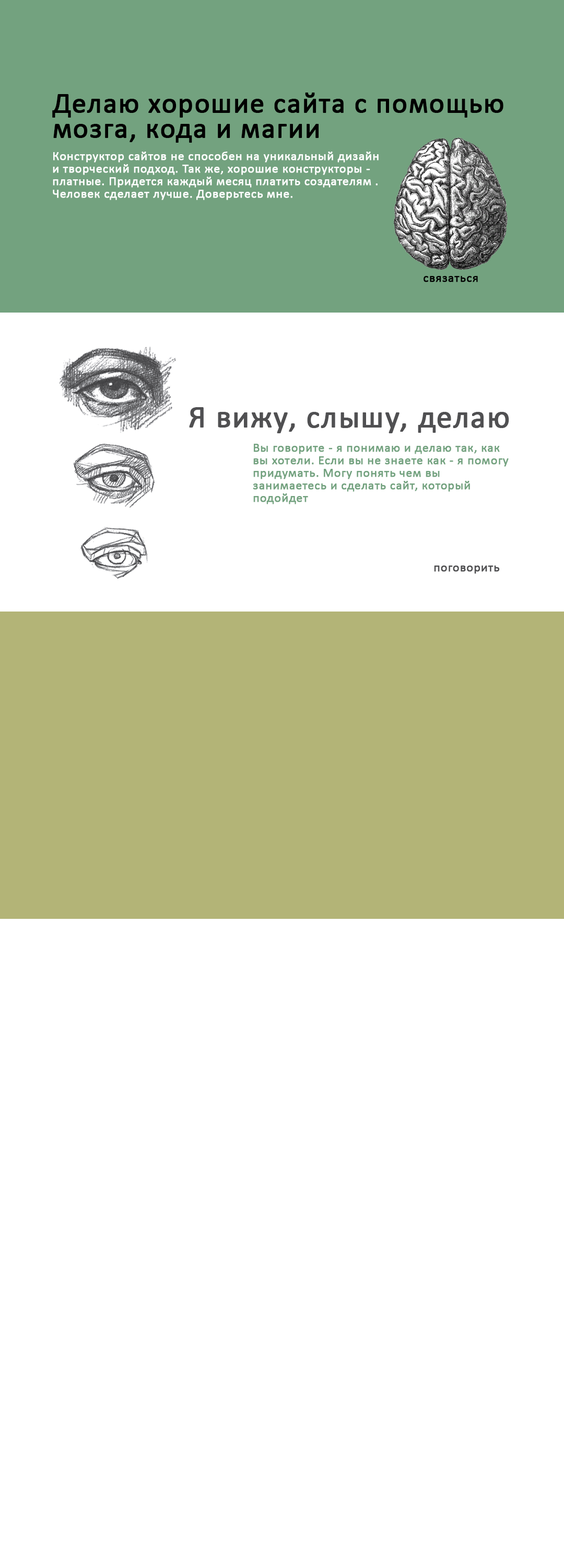
<style>
.page{position:relative;width:564px;height:1568px;background:#ffffff}
.page>*{position:absolute;margin:0}
.t1{font:28.7px/25.1px "Calibri";letter-spacing:0.02em;color:#000000;font-weight:bold}
.t2{font:12.5px/12.5px "Calibri";letter-spacing:0.02em;color:#ffffff;font-weight:bold}
.t3{font:12.5px "Calibri";letter-spacing:0.02em;color:#000000;font-weight:bold}
.t4{font:31.4px "Calibri";letter-spacing:0.02em;color:#505052;font-weight:bold}
.t5{font:12.5px/12.5px "Calibri";letter-spacing:0.02em;color:#73a27f;font-weight:bold}
.t6{font:12.5px "Calibri";letter-spacing:0.02em;color:#505052;font-weight:bold}
</style>
<div class="page">
<p class="t1" style="left:52px;top:93px;width:452px;height:50px">Делаю хорошие сайта с помощью мозга, кода и магии</p>
<p class="t2" style="left:53px;top:152px;width:326px;height:48px">Конструктор сайтов не способен на уникальный дизайн и творческий подход. Так же, хорошие конструкторы - платные. Придется каждый месяц платить создателям . Человек сделает лучше. Доверьтесь мне.</p>
<p class="t3" style="left:424px;top:276px;width:54px;height:6px">связаться</p>
<p class="t4" style="left:189px;top:407px;width:321px;height:26px">Я вижу, слышу, делаю</p>
<p class="t5" style="left:253px;top:444px;width:256px;height:60px">Вы говорите - я понимаю и делаю так, как вы хотели. Если вы не знаете как - я помогу придумать. Могу понять чем вы занимаетесь и сделать сайт, который подойдет</p>
<p class="t6" style="left:434px;top:566px;width:66px;height:8px">поговорить</p>
</div>
